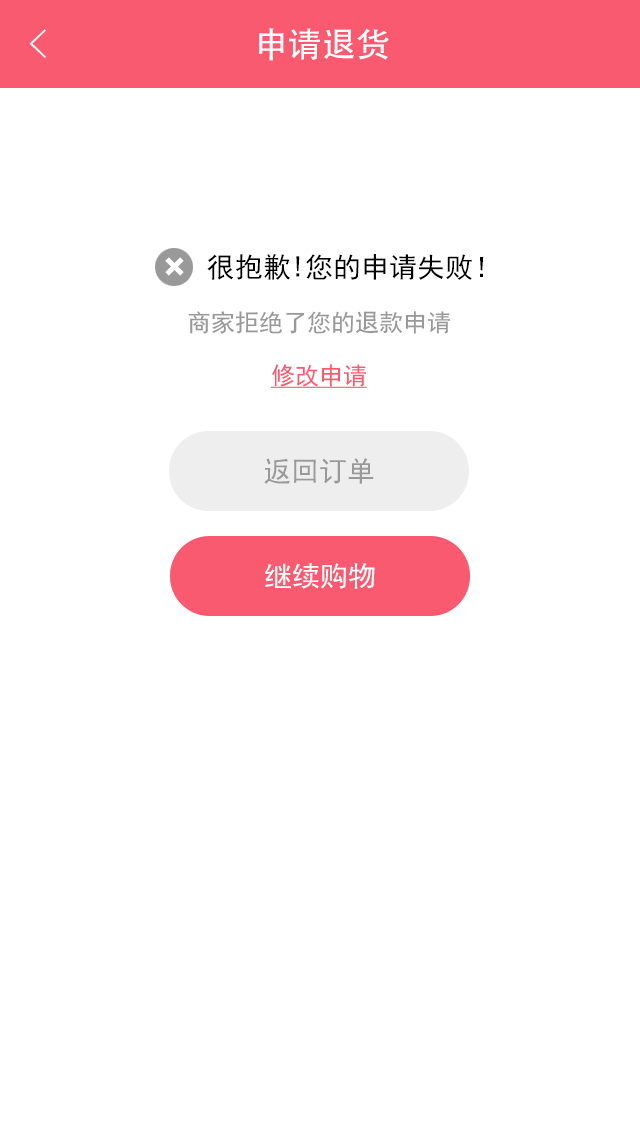
<style>
.page{position:relative;width:640px;height:1136px;background:#ffffff}
.page>*{position:absolute;margin:0}
.t1{font:40px "FZYXJW--GB1-0";color:#ffffff}
.t2{font:34px "AdobeHeitiStd-Regular";color:#ffffff}
.t3{font:28px "SimHei";color:#000000}
.t4{font:24px "SimHei";color:#999999}
.t5{font:24px "SimHei";color:#f95a70;text-decoration:underline}
.t6{font:28px "SimHei";color:#999999}
.t7{font:28px "SimHei";color:#ffffff}
</style>
<div class="page">
<p class="t1" style="left:29px;top:29px;width:17px;height:29px">&lt;</p>
<p class="t2" style="left:259px;top:28px;width:130px;height:33px">申请退货</p>
<p class="t3" style="left:207px;top:254px;width:277px;height:26px">很抱歉!您的申请失败！</p>
<p class="t4" style="left:188px;top:311px;width:262px;height:23px">商家拒绝了您的退款申请</p>
<p class="t5" style="left:270px;top:364px;width:97px;height:24px">修改申请</p>
<p class="t6" style="left:264px;top:458px;width:110px;height:26px">返回订单</p>
<p class="t7" style="left:265px;top:563px;width:110px;height:26px">继续购物</p>
</div>
